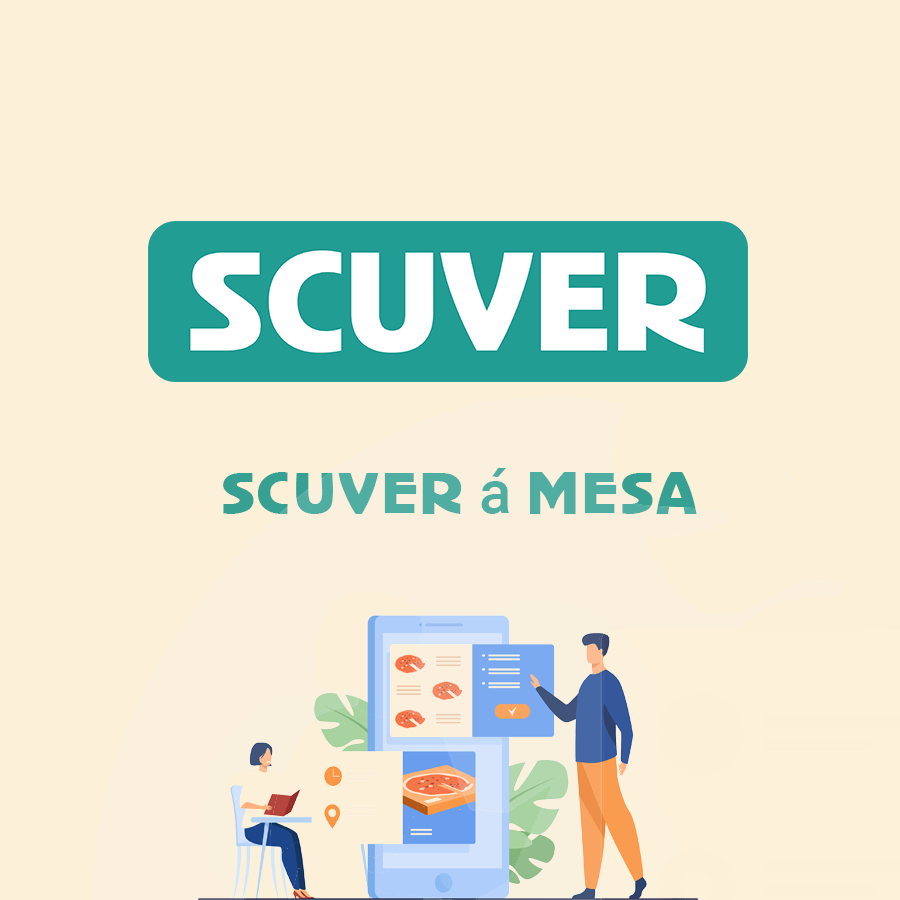
<style>
.page{position:relative;width:900px;height:900px;background:#fdf0d8}
.page>*{position:absolute;margin:0}
.t1{font:60px "LegothicBold"}
.t2{font:60px "Roboto-Medium"}
</style>
<div class="page">
<p class="t1" style="left:223px;top:468px;width:474px;height:46px">SCUVER <span class="t2">á </span>MESA</p>
</div>
